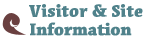
<style>
.page{position:relative;width:146px;height:40px;background:#ffffff}
.page>*{position:absolute;margin:0}
.t1{font:17px "Acuta-Fat";color:#50828b}
</style>
<div class="page">
<p class="t1" style="left:29px;top:4px;width:114px;height:13px">Visitor &amp; Site</p>
</div>
